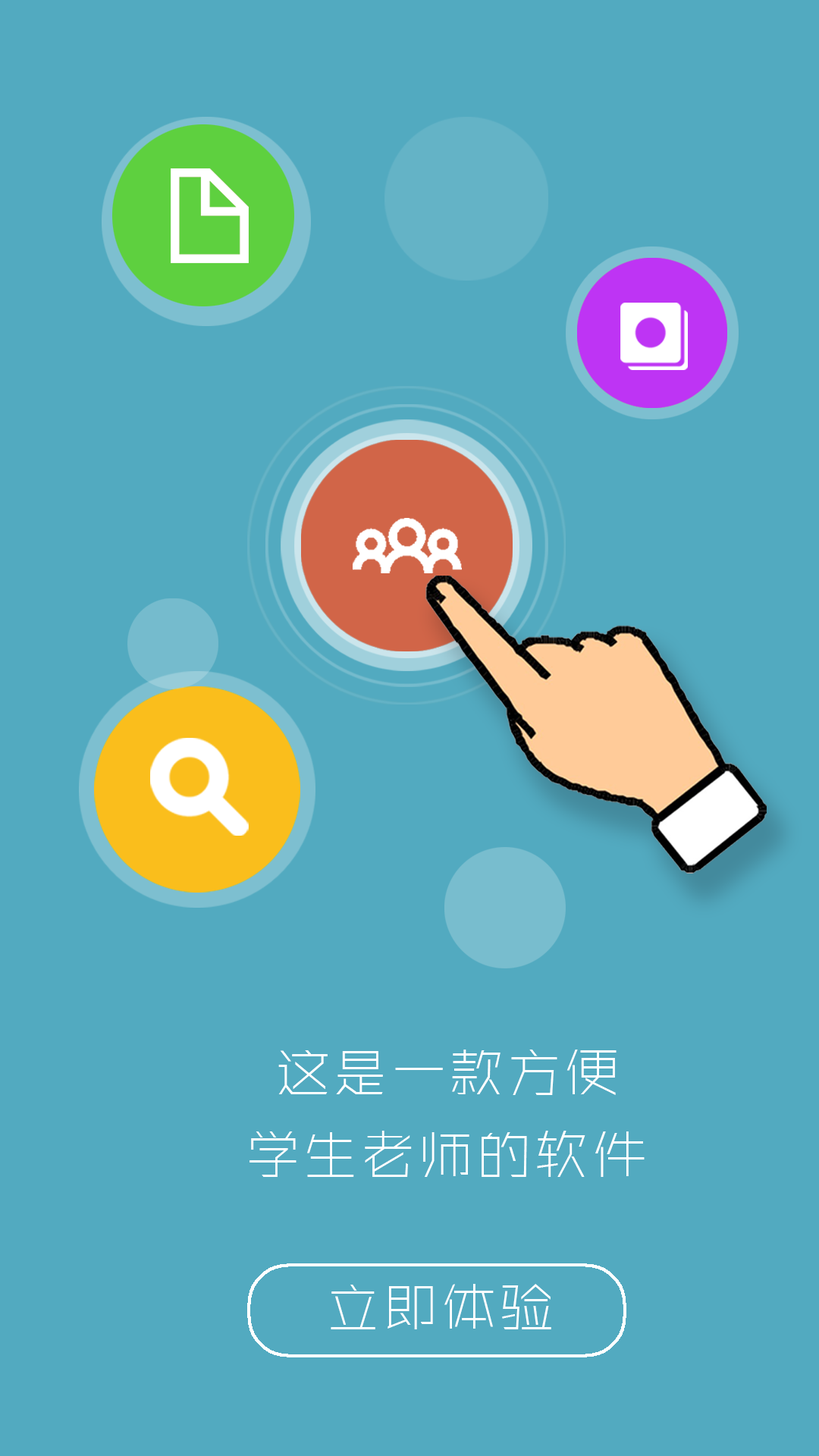
<style>
.page{position:relative;width:819px;height:1456px;background:#52aac0}
.page>*{position:absolute;margin:0}
.t1{font:54.6px "ZHSRXT--GBK1-0";letter-spacing:0.06em;color:#ffffff}
</style>
<div class="page">
<p class="t1" style="left:278px;top:1050px;width:339px;height:45px">这是一款方便</p>
<p class="t1" style="left:249px;top:1131px;width:396px;height:46px">学生老师的软件</p>
<p class="t1" style="left:331px;top:1284px;width:220px;height:45px">立即体验</p>
</div>
